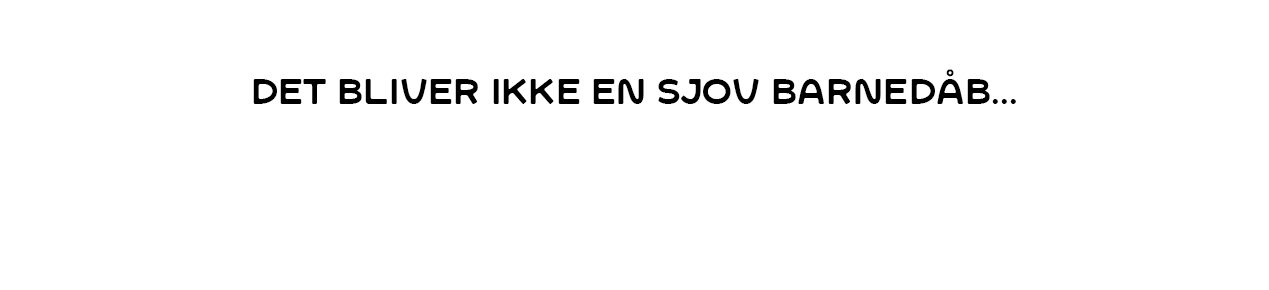
<style>
.page{position:relative;width:1269px;height:290px;background:#ffffff}
.page>*{position:absolute;margin:0}
.t1{font:35.4px "SFCWosterSans-Regular";letter-spacing:0.001em;color:#000000}
</style>
<div class="page">
<p class="t1" style="left:253px;top:69px;width:763px;height:35px">Det bliver ikke en sjov barnedåb...</p>
</div>
